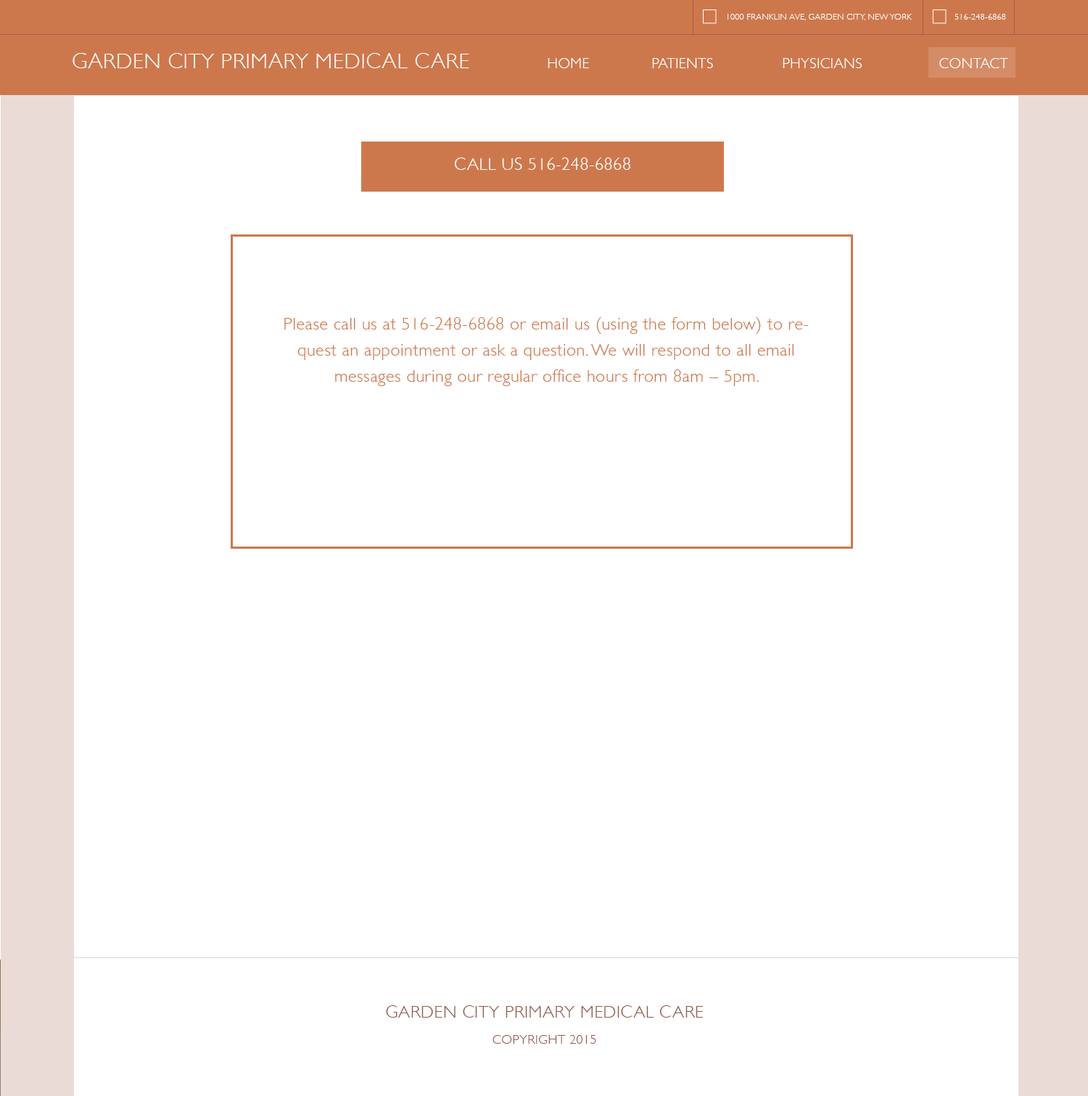
<style>
.page{position:relative;width:1088px;height:1096px;background:#ffffff}
.page>*{position:absolute;margin:0}
.t1{font:8.7px "GillSans-Light";letter-spacing:0.025em;color:#ffffff;text-transform:uppercase}
.t2{font:21.8px "GillSans-Light";letter-spacing:0.025em;color:#ffffff;text-transform:uppercase}
.t3{font:14.5px "GillSans-Light";letter-spacing:0.025em;color:#ffffff;text-transform:uppercase}
.t4{font:17.4px "GillSans-Light";letter-spacing:0.025em;color:#ffffff;text-transform:uppercase}
.t5{font:17.4px/26.1px "GillSans-Light";letter-spacing:0.025em;color:#cd784c}
.t6{font:17.4px/26.1px "GillSans-Light";letter-spacing:0.025em;color:#945b4d;text-transform:uppercase}
.t7{font:13.1px/26.1px "GillSans-Light";letter-spacing:0.025em;color:#945b4d;text-transform:uppercase}
</style>
<div class="page">
<p class="t1" style="left:728px;top:14px;width:184px;height:6px">1000 Franklin Ave, Garden City, NEw yORK</p>
<p class="t1" style="left:955px;top:14px;width:51px;height:6px">516-248-6868</p>
<p class="t2" style="left:73px;top:53px;width:396px;height:15px">Garden City Primary mEDICAL cARE</p>
<p class="t3" style="left:548px;top:58px;width:461px;height:10px">Home    Patients    Physicians    Contact</p>
<p class="t4" style="left:455px;top:157px;width:176px;height:13px">call Us 516-248-6868</p>
<p class="t5" style="left:284px;top:317px;width:525px;height:69px;text-align:center">Please call us at 516-248-6868 or email us (using the form below) to request an appointment or ask a question. We will respond to all email messages during our regular office hours from 8am – 5pm.</p>
<p class="t6" style="left:386px;top:1005px;width:318px;height:38px;text-align:center">Garden City Primary Medical Care<br><span class="t7">Copyright 2015</span></p>
</div>
